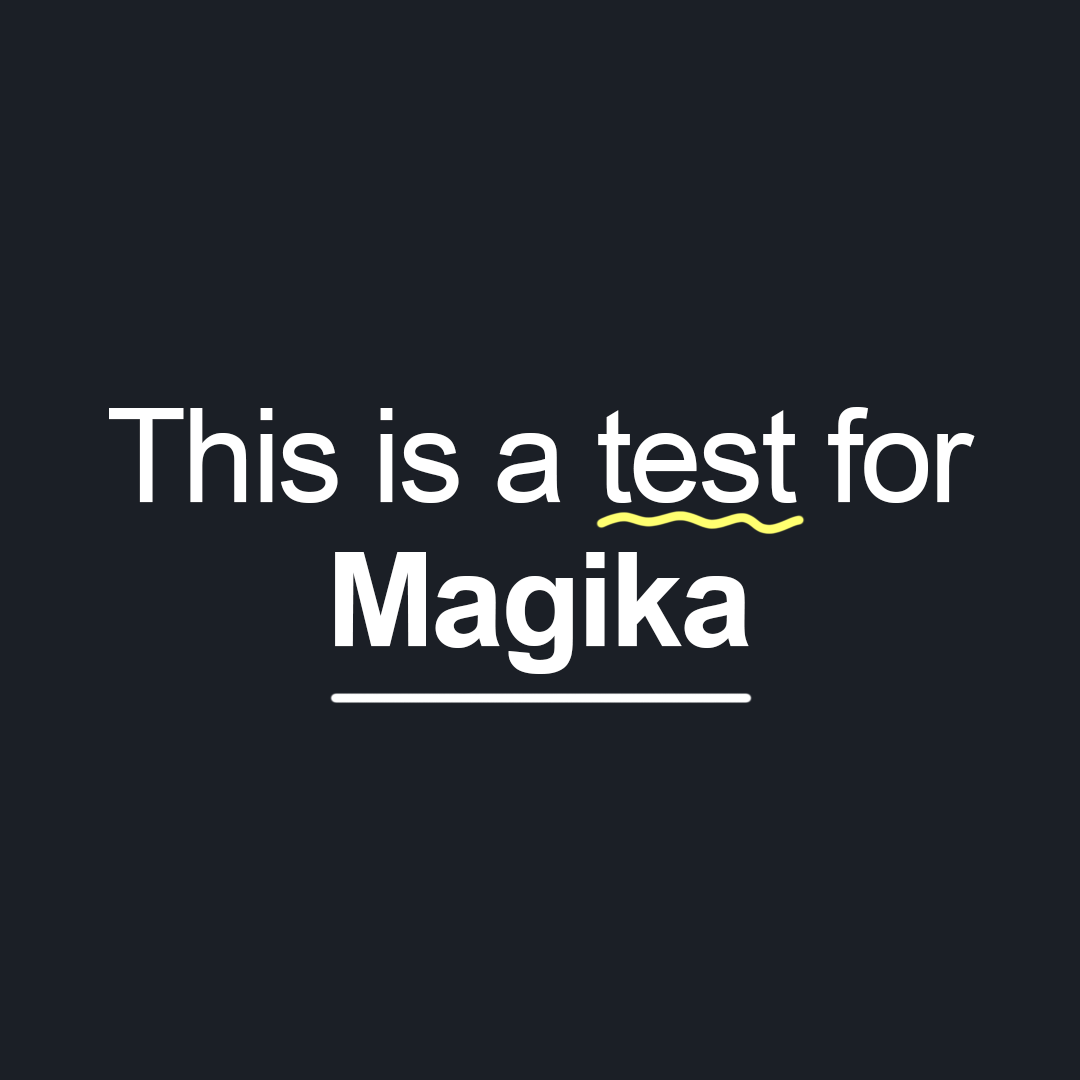
<style>
.page{position:relative;width:1080px;height:1080px;background:#1b1f26}
.page>*{position:absolute;margin:0}
.t1{font:130.7px/144px "ArialMT";letter-spacing:-0.025em;color:#ffffff}
.t2{font:130.7px/144px "Arial-BoldMT";letter-spacing:-0.025em;color:#ffffff}
</style>
<div class="page">
<p class="t1" style="left:109px;top:407px;width:866px;height:267px;text-align:center">This is a test for<br><span class="t2">Magika</span></p>
</div>
